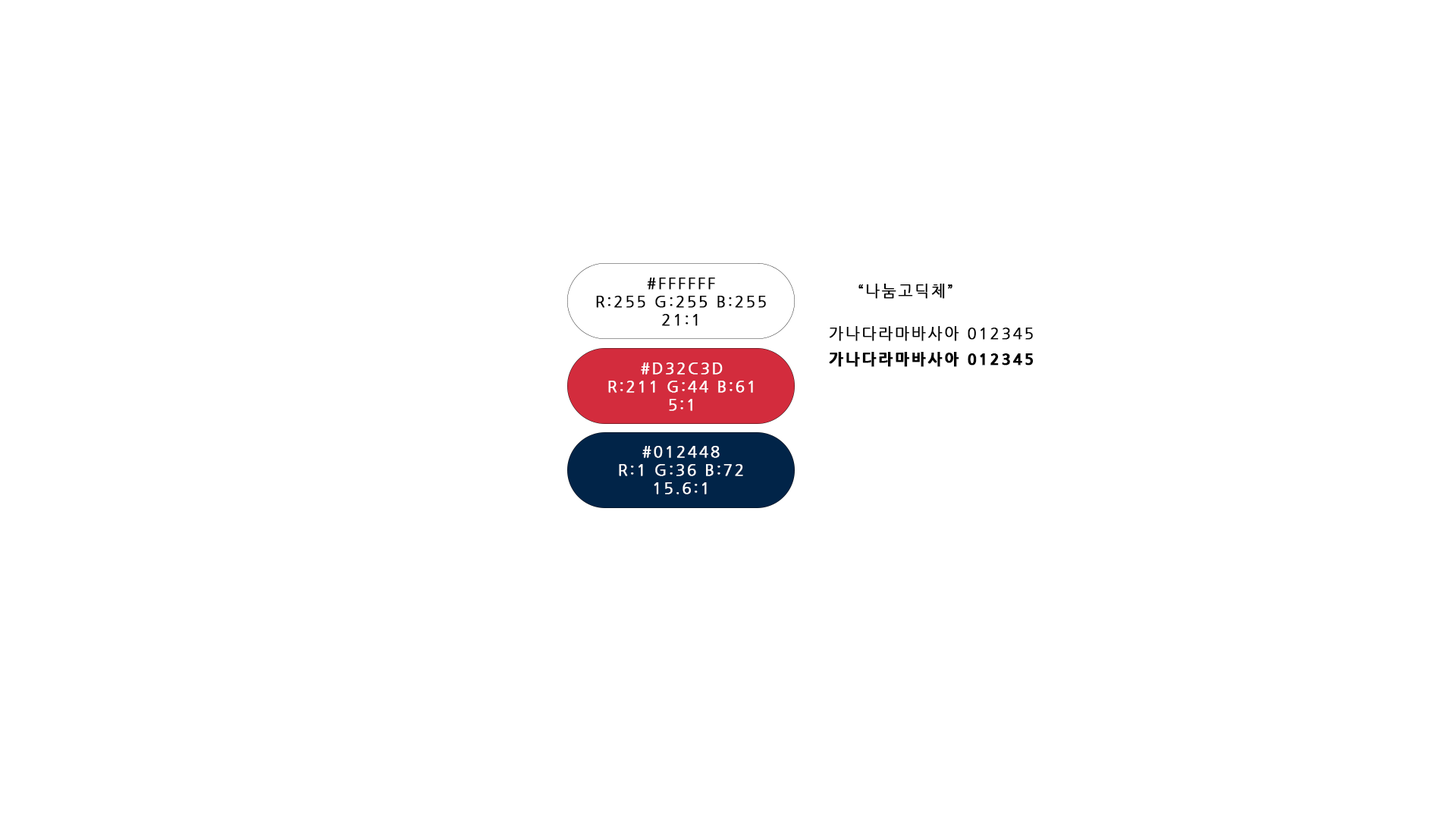
<style>
.page{position:relative;width:1456px;height:819px;background:#ffffff}
.page>*{position:absolute;margin:0}
.t1{font:15.2px "NanumGothic";letter-spacing:0.12em;color:#000000;font-weight:bold}
.t2{font:15.2px "NanumGothicExtraBold";letter-spacing:0.12em;color:#000000;font-weight:bold}
.t3{font:15.2px "NanumGothic";letter-spacing:0.12em;color:#ffffff;font-weight:bold}
</style>
<div class="page">
<p class="t1" style="left:596px;top:278px;width:170px;height:48px;text-align:center">#FFFFFF<br>R:255 G:255 B:255<br>21:1</p>
<p class="t1" style="left:858px;top:284px;width:94px;height:15px">“나눔고딕체”</p>
<p class="t1" style="left:829px;top:326px;width:204px;height:15px">가나다라마바사아 012345</p>
<p class="t2" style="left:829px;top:352px;width:205px;height:15px">가나다라마바사아 012345</p>
<p class="t3" style="left:608px;top:362px;width:145px;height:49px;text-align:center">#D32C3D<br>R:211 G:44 B:61<br>5:1</p>
<p class="t3" style="left:619px;top:446px;width:124px;height:48px;text-align:center">#012448<br>R:1 G:36 B:72<br>15.6:1</p>
</div>
